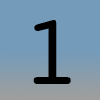
<style>
.page{position:relative;width:100px;height:100px}
.page>*{position:absolute;margin:0}
.t1{font:100px "Courier";letter-spacing:0.008em;color:#000000}
</style>
<div class="page">
<p class="t1" style="left:33px;top:20px;width:38px;height:64px">1</p>
</div>
